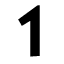
<style>
.page{position:relative;width:64px;height:64px;background:#ffffff}
.page>*{position:absolute;margin:0}
.t1{font:66.7px "(ÇÑ)°¢¸Ó¸®D";color:#000000}
</style>
<div class="page">
<p class="t1" style="left:18px;top:5px;width:22px;height:52px">1</p>
</div>
